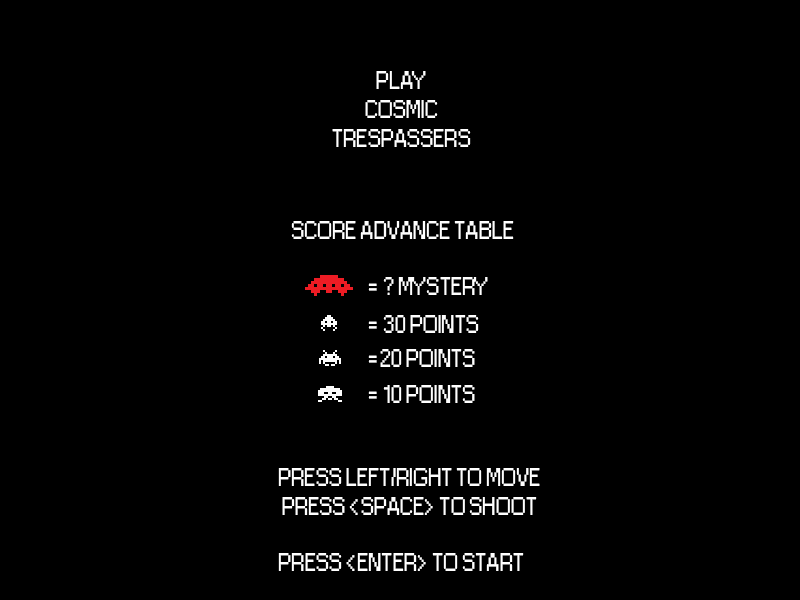
<style>
.page{position:relative;width:800px;height:600px;background:#000000}
.page>*{position:absolute;margin:0}
.t1{font:24px "Small Fonts";color:#ffffff}
</style>
<div class="page">
<p class="t1" style="left:332px;top:71px;width:139px;height:76px;text-align:center">PLAY<br>COSMIC<br>TRESPASSERS</p>
<p class="t1" style="left:291px;top:221px;width:223px;height:18px">SCORE ADVANCE TABLE</p>
<p class="t1" style="left:368px;top:277px;width:120px;height:18px">= ? MYSTERY</p>
<p class="t1" style="left:368px;top:315px;width:111px;height:18px">= 30 POINTS</p>
<p class="t1" style="left:368px;top:349px;width:107px;height:18px">=20 POINTS</p>
<p class="t1" style="left:368px;top:385px;width:107px;height:18px">= 10 POINTS</p>
<p class="t1" style="left:278px;top:468px;width:262px;height:47px;text-align:center">PRESS LEFT/RIGHT TO MOVE<br>PRESS &lt;SPACE&gt; TO SHOOT</p>
<p class="t1" style="left:278px;top:553px;width:246px;height:18px">PRESS &lt;ENTER&gt; TO START</p>
</div>
